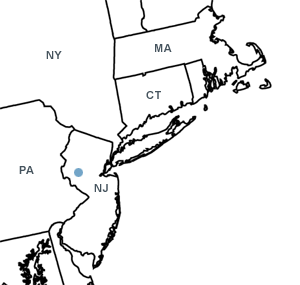
<style>
.page{position:relative;width:300px;height:285px;background:#ffffff}
.page>*{position:absolute;margin:0}
.t1{font:10.9px "Arial-BoldMT";letter-spacing:0.05em;color:#45535d}
</style>
<div class="page">
<p class="t1" style="left:46px;top:51px;width:16px;height:8px">NY</p>
<p class="t1" style="left:155px;top:44px;width:17px;height:8px">MA</p>
<p class="t1" style="left:146px;top:91px;width:15px;height:8px">CT</p>
<p class="t1" style="left:19px;top:166px;width:15px;height:8px">PA</p>
<p class="t1" style="left:94px;top:184px;width:14px;height:8px">NJ</p>
</div>
